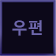
<style>
.page{position:relative;width:56px;height:56px;background:#0c0819}
.page>*{position:absolute;margin:0}
.t1{font:16px "MalgunGothicBold";color:#6f68ae}
</style>
<div class="page">
<p class="t1" style="left:12px;top:20px;width:30px;height:16px">우편</p>
</div>
